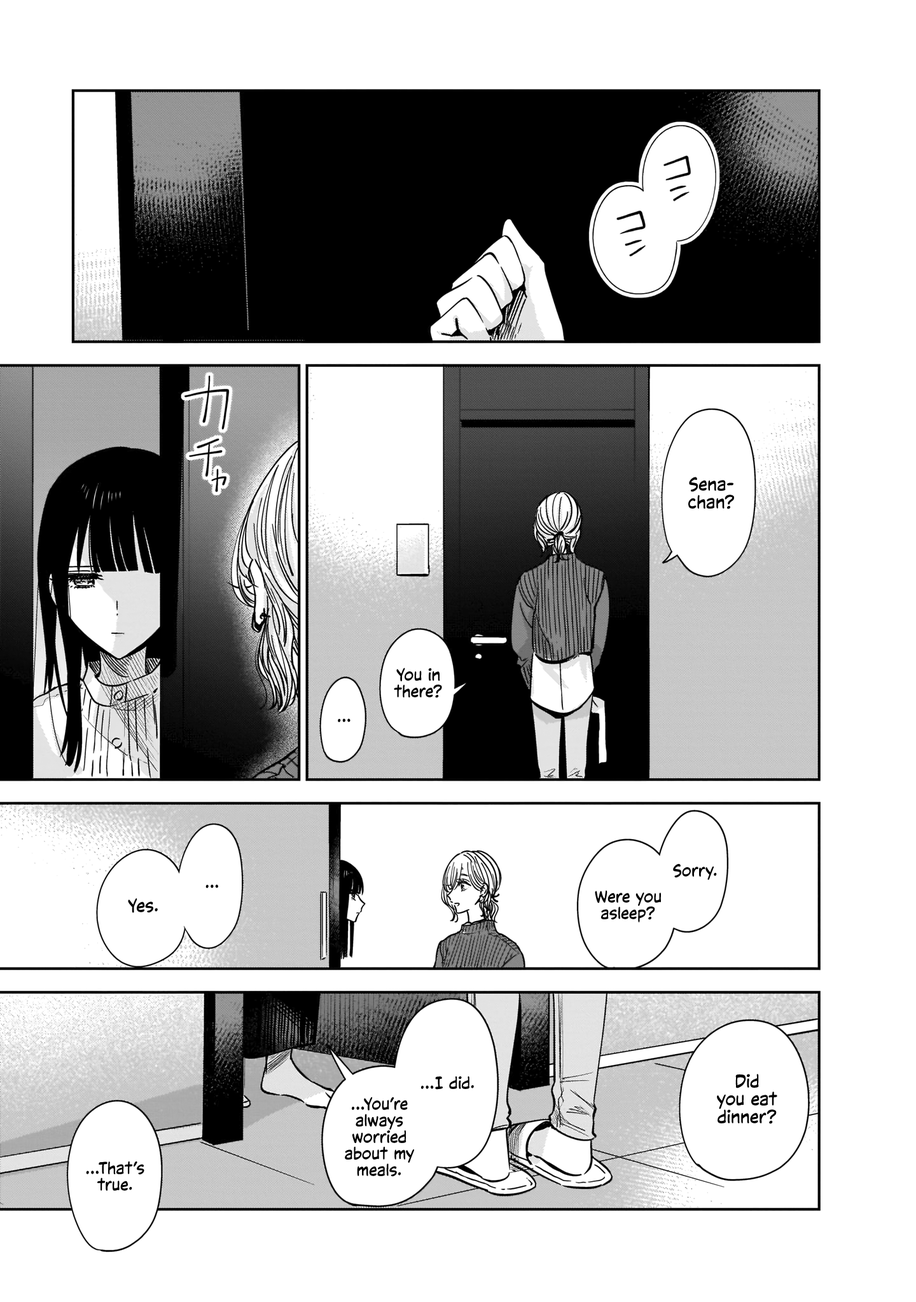
<style>
.page{position:relative;width:916px;height:1302px;background:#ffffff}
.page>*{position:absolute;margin:0}
.t1{font:17.8px "CCVictorySpeechLower-Regular";color:#000000}
.t2{font:16.5px "CCVictorySpeechLower-Regular";color:#000000}
</style>
<div class="page">
<p class="t1" style="left:688px;top:477px;width:46px;height:32px;text-align:center">Sena-<br>chan?</p>
<p class="t2" style="left:394px;top:668px;width:48px;height:30px;text-align:center">You in<br>there?</p>
<p class="t2" style="left:338px;top:719px;width:12px;height:3px">...</p>
<p class="t2" style="left:673px;top:864px;width:44px;height:16px">Sorry.</p>
<p class="t2" style="left:205px;top:884px;width:13px;height:4px">...</p>
<p class="t2" style="left:595px;top:890px;width:66px;height:33px;text-align:center">Were you<br>asleep?</p>
<p class="t1" style="left:128px;top:898px;width:30px;height:15px">Yes.</p>
<p class="t1" style="left:717px;top:1074px;width:60px;height:50px;text-align:center">Did<br>you eat<br>dinner?</p>
<p class="t2" style="left:421px;top:1077px;width:53px;height:13px">...I did.</p>
<p class="t2" style="left:345px;top:1097px;width:69px;height:80px;text-align:center">...You’re<br>always<br>worried<br>about my<br>meals.</p>
<p class="t2" style="left:86px;top:1161px;width:58px;height:30px;text-align:center">...That’s<br>true.</p>
</div>
